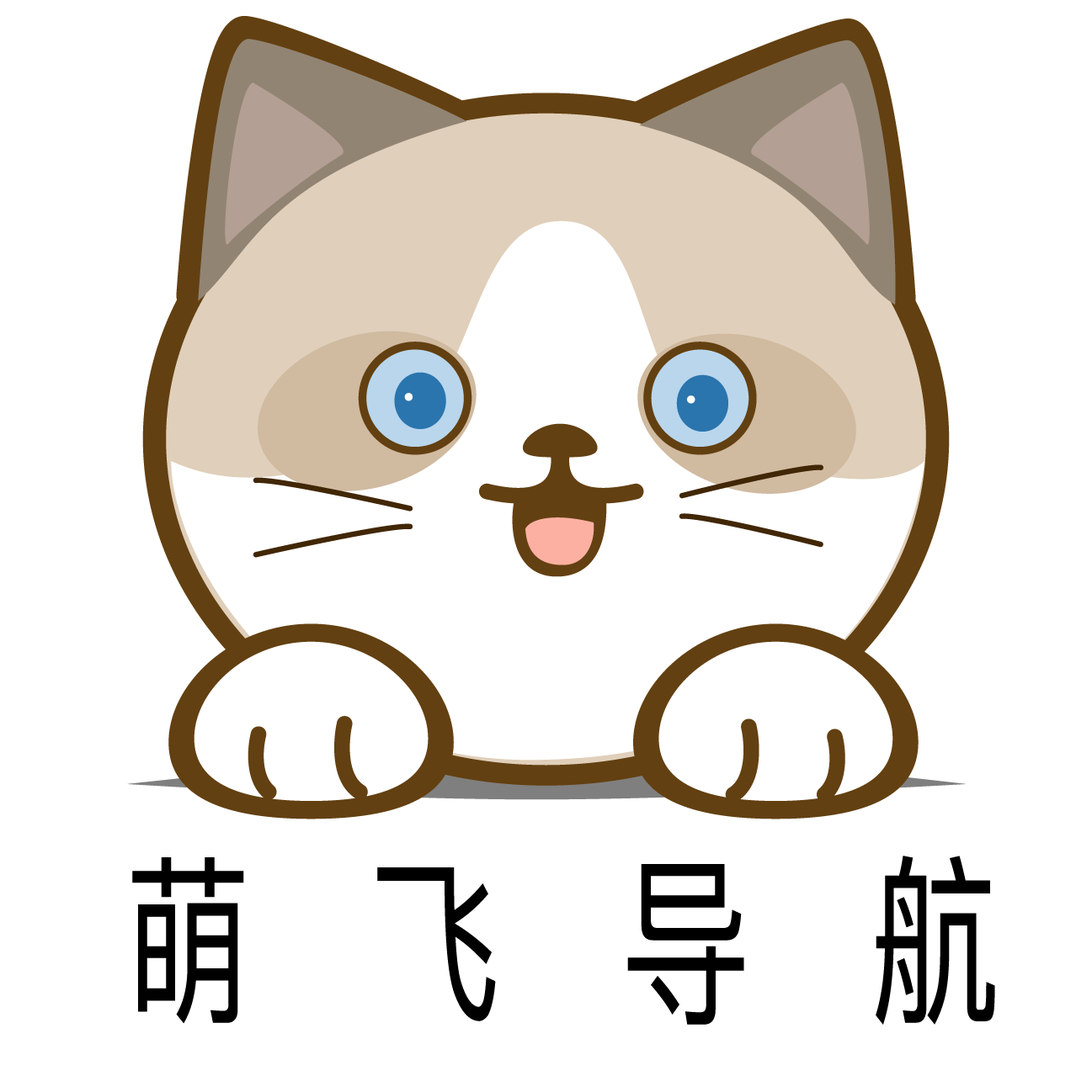
<style>
.page{position:relative;width:1092px;height:1092px;background:#ffffff}
.page>*{position:absolute;margin:0}
.t1{font:182.1px "PingFangSC-Regular";letter-spacing:0.94em;color:#000000;scale:0.7 1}
</style>
<div class="page">
<p class="t1" style="left:132px;top:856px;width:863px;height:169px">萌飞导航</p>
</div>
